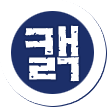
<style>
.page{position:relative;width:107px;height:107px;background:#ffffff}
.page>*{position:absolute;margin:0}
.t1{font:62.5px "H2mkpB";color:#ffffff}
</style>
<div class="page">
<p class="t1" style="left:25px;top:25px;width:54px;height:57px">캙</p>
</div>
